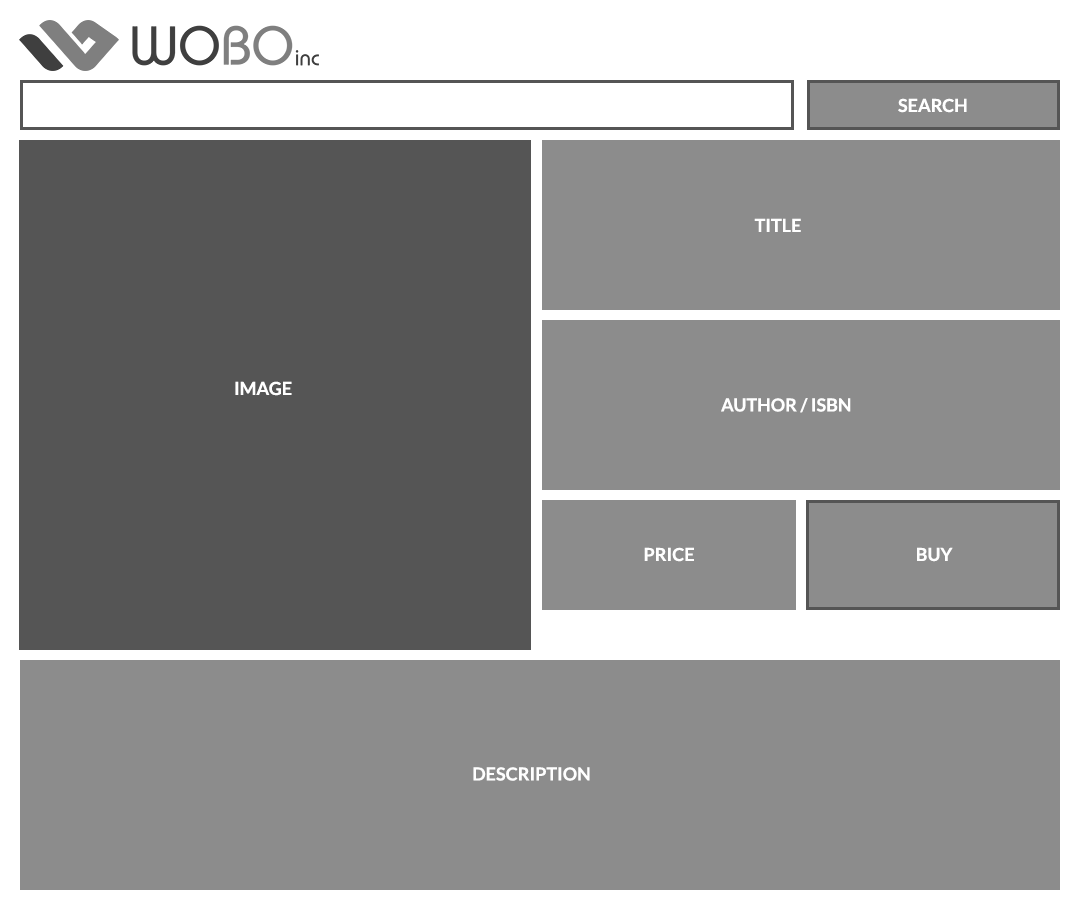
<style>
.page{position:relative;width:1080px;height:900px;background:#8c8c8c}
.page>*{position:absolute;margin:0}
.t1{font:18px "Lato-Bold";color:#ffffff}
</style>
<div class="page">
<p class="t1" style="left:898px;top:98px;width:69px;height:15px">SEARCH</p>
<p class="t1" style="left:754px;top:218px;width:47px;height:14px">TITLE</p>
<p class="t1" style="left:235px;top:381px;width:57px;height:15px">IMAGE</p>
<p class="t1" style="left:721px;top:398px;width:130px;height:15px">AUTHOR / ISBN</p>
<p class="t1" style="left:644px;top:547px;width:50px;height:15px">PRICE</p>
<p class="t1" style="left:917px;top:547px;width:36px;height:15px">BUY</p>
<p class="t1" style="left:473px;top:767px;width:117px;height:14px">DESCRIPTION</p>
</div>
